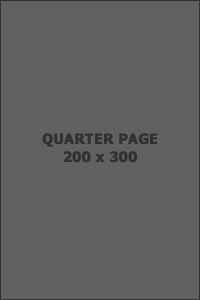
<style>
.page{position:relative;width:200px;height:300px;background:#616161}
.page>*{position:absolute;margin:0}
.t1{font:14px/18px "Tahoma-Bold";letter-spacing:0.01em;color:#323232;font-weight:bold}
</style>
<div class="page">
<p class="t1" style="left:42px;top:133px;width:116px;height:30px;text-align:center">QUARTER PAGE<br>200 x 300</p>
</div>
